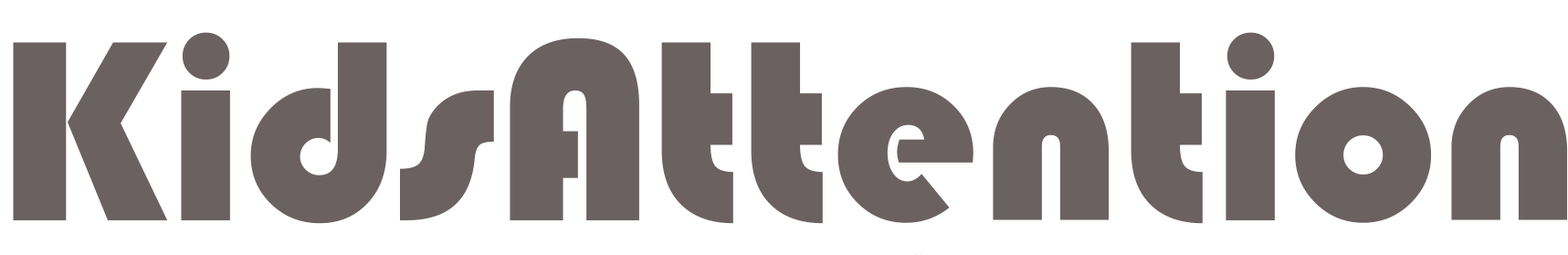
<style>
.page{position:relative;width:1568px;height:255px;background:#ffffff}
.page>*{position:absolute;margin:0}
.t1{font:266.4px "STHupo";color:#6c6161}
</style>
<div class="page">
<p class="t1" style="left:13px;top:32px;width:1555px;height:192px">KidsAttention</p>
</div>
